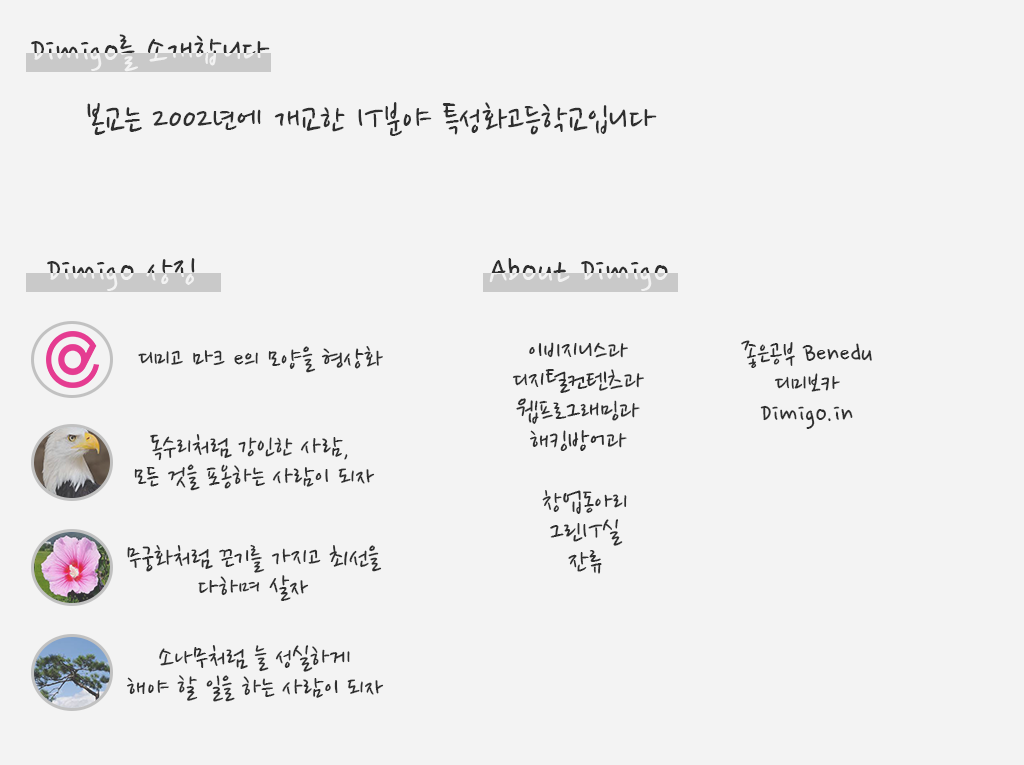
<style>
.page{position:relative;width:1024px;height:765px;background:#f3f3f3}
.page>*{position:absolute;margin:0}
.t1{font:40px "NanumPen"}
.t2{font:40px "NanumPen";color:#2f2f2f}
.t3{font:30px/30px "NanumPen";color:#2f2f2f}
.t4{font:30px "NanumPen";color:#2f2f2f}
</style>
<div class="page">
<p class="t1" style="left:31px;top:34px;width:239px;height:38px">Dimigo를 소개합니다</p>
<p class="t1" style="left:31px;top:34px;width:239px;height:38px">Dimigo를 소개합니다</p>
<p class="t2" style="left:87px;top:102px;width:570px;height:34px">본교는 2002년에 개교한 IT분야 특성화고등학교입니다</p>
<p class="t1" style="left:47px;top:258px;width:148px;height:33px">Dimigo 상징</p>
<p class="t1" style="left:47px;top:258px;width:148px;height:33px">Dimigo 상징</p>
<p class="t1" style="left:489px;top:258px;width:179px;height:33px">About Dimigo</p>
<p class="t1" style="left:489px;top:258px;width:179px;height:33px">About Dimigo</p>
<p class="t3" style="left:512px;top:342px;width:132px;height:109px;text-align:center">이비지니스과<br>디지털컨텐츠과<br>웹프로그래밍과<br>해킹방어과</p>
<p class="t3" style="left:741px;top:340px;width:131px;height:89px;text-align:center">좋은공부 Benedu<br>디미보카<br>Dimigo.in</p>
<p class="t4" style="left:138px;top:346px;width:245px;height:27px">디미고 마크 e의 모양을 형상화</p>
<p class="t3" style="left:134px;top:434px;width:241px;height:57px;text-align:center">독수리처럼 강인한 사람, <br>모든 것을 포옹하는 사람이 되자</p>
<p class="t3" style="left:542px;top:490px;width:85px;height:84px;text-align:center">창업동아리<br>그린IT실<br>잔류</p>
<p class="t3" style="left:127px;top:544px;width:255px;height:57px;text-align:center">무궁화처럼 끈기를 가지고 최선을<br>다하며 살자</p>
<p class="t3" style="left:127px;top:645px;width:257px;height:57px;text-align:center">소나무처럼 늘 성실하게<br>해야 할 일을 하는 사람이 되자</p>
</div>
